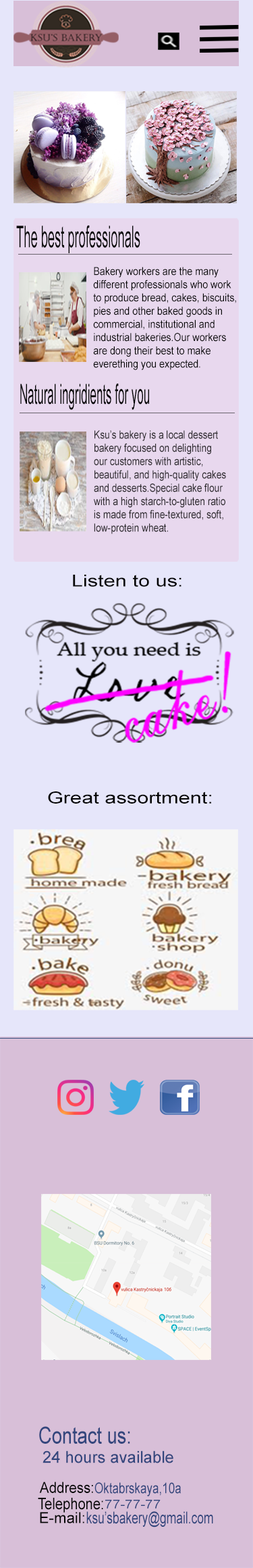
<style>
.page{position:relative;width:253px;height:1568px;background:#d8bfd8}
.page>*{position:absolute;margin:0}
.t1{font:30.1px "ArialMT";color:#050505;scale:0.41 1}
.t2{font:11px "ArialMT";color:#050505;scale:0.88 1}
.t3{font:27.7px "ArialMT";color:#050505;scale:0.41 1}
.t4{font:11.1px "ArialMT";color:#332f34;scale:0.84 1}
.t5{font:16.4px "ArialMT";color:#050505;scale:1.26 1}
.t6{font:23.2px "ArialMT";color:#33467d;scale:0.79 1}
.t7{font:16.3px "ArialMT";color:#33467d}
.t8{font:15.4px "ArialMT";color:#050505;scale:0.9 1}
.t9{font:14.7px "ArialMT";color:#33467d;scale:0.78 1}
.t10{font:16px "ArialMT";color:#050505;scale:0.85 1}
.t11{font:12.2px "ArialMT";color:#33467d;scale:1.15 1}
.t12{font:15.2px "ArialMT";color:#050505}
.t13{font:16.5px "ArialMT";color:#33467d;scale:0.71 1}
</style>
<div class="page">
<p class="t1" style="left:16px;top:225px;width:124px;height:28px">The best professionals</p>
<p class="t2" style="left:93px;top:267px;width:143px;height:103px">Bakery workers are the many <br>different professionals who work <br>to produce bread, cakes, biscuits, <br>pies and other baked goods in <br>commercial, institutional and<br>industrial bakeries.Our workers <br>are dong their best to make <br>everething you expected.</p>
<p class="t3" style="left:20px;top:384px;width:129px;height:26px">Natural ingridients for you</p>
<p class="t4" style="left:94px;top:430px;width:132px;height:104px">Ksu’s bakery is a local dessert<br>bakery focused on delighting <br>our customers with artistic, <br>beautiful, and high-quality cakes<br>and desserts.Special cake flour <br>with a high starch-to-gluten ratio<br>is made from fine-textured, soft, <br>low-protein wheat.</p>
<p class="t5" style="left:73px;top:575px;width:109px;height:12px">Listen to us:</p>
<p class="t5" style="left:48px;top:791px;width:163px;height:13px">Great assortment:</p>
<p class="t6" style="left:39px;top:1426px;width:91px;height:18px">Contact us:</p>
<p class="t7" style="left:43px;top:1451px;width:131px;height:12px">24 hours available</p>
<p class="t8" style="left:39px;top:1482px;width:54px;height:11px">Address:</p>
<p class="t9" style="left:95px;top:1482px;width:86px;height:14px">Oktabrskaya,10a</p>
<p class="t10" style="left:38px;top:1498px;width:65px;height:15px">Telephone:</p>
<p class="t11" style="left:105px;top:1500px;width:56px;height:9px">77-77-77</p>
<p class="t12" style="left:40px;top:1512px;width:44px;height:11px">E-mail:</p>
<p class="t13" style="left:86px;top:1511px;width:127px;height:16px">ksu’sbakery@gmail.com</p>
</div>
